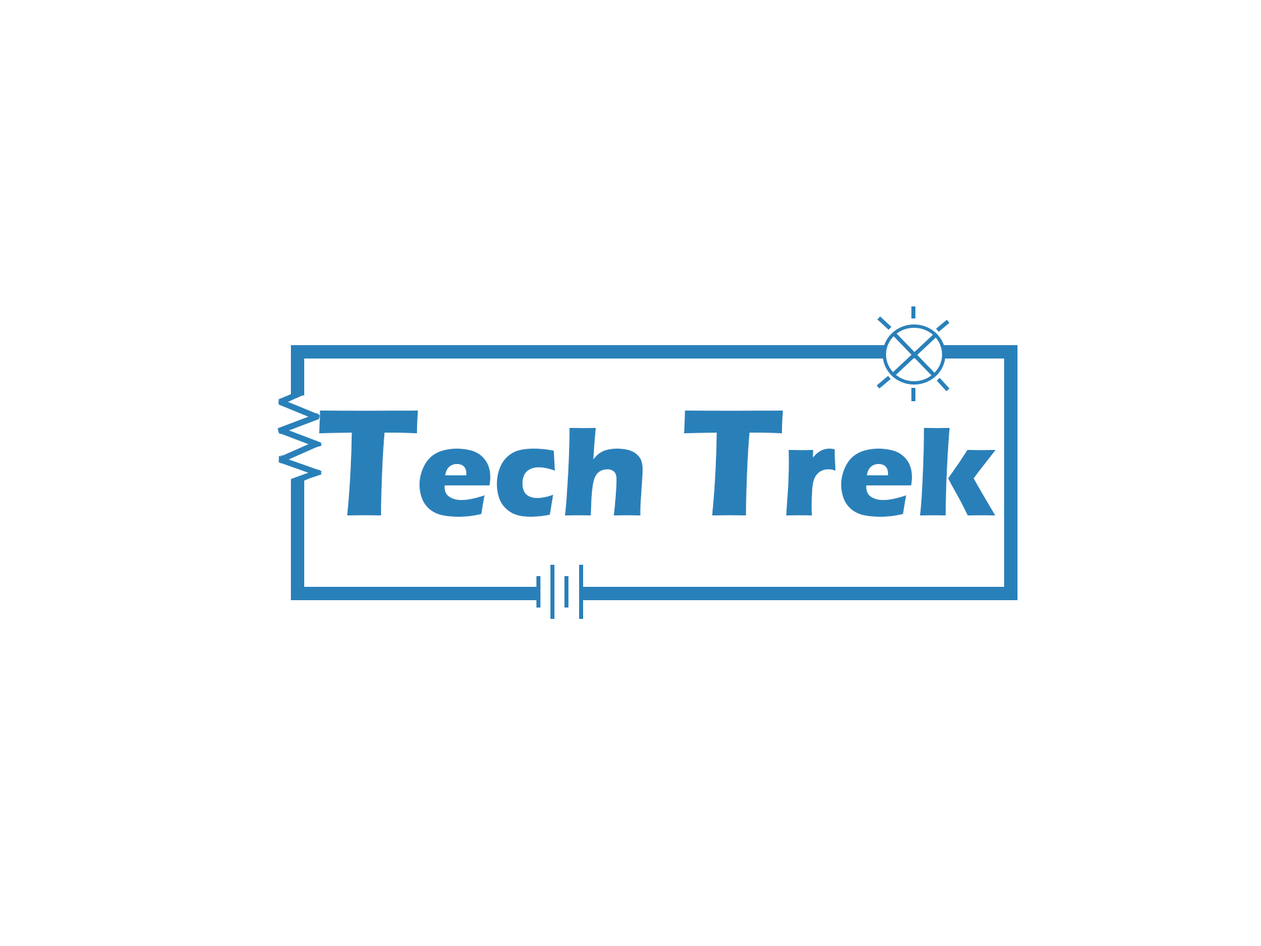
<style>
.page{position:relative;width:1261px;height:946px;background:#ffffff}
.page>*{position:absolute;margin:0}
.t1{font:130.8px "ErasITC-Bold";color:#2980b9}
.t2{font:157px "ErasITC-Bold";color:#2980b9}
</style>
<div class="page">
<p class="t1" style="left:319px;top:410px;width:677px;height:106px"><span class="t2">T</span>ech <span class="t2">T</span>rek</p>
</div>
